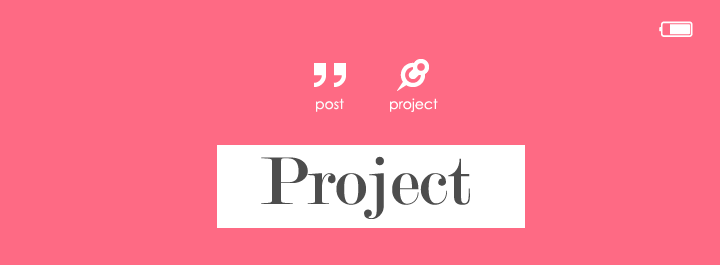
<style>
.page{position:relative;width:720px;height:265px;background:#fe6a84}
.page>*{position:absolute;margin:0}
.t1{font:14px "CenturyGothic";color:#fbfbfb}
.t2{font:14px "CenturyGothic";color:#ffffff}
.t3{font:72px "Modern-Regular";color:#4c4c4c}
</style>
<div class="page">
<p class="t1" style="left:316px;top:98px;width:28px;height:14px">post</p>
<p class="t2" style="left:390px;top:98px;width:48px;height:14px">project</p>
<p class="t3" style="left:261px;top:156px;width:209px;height:63px">Project</p>
</div>
